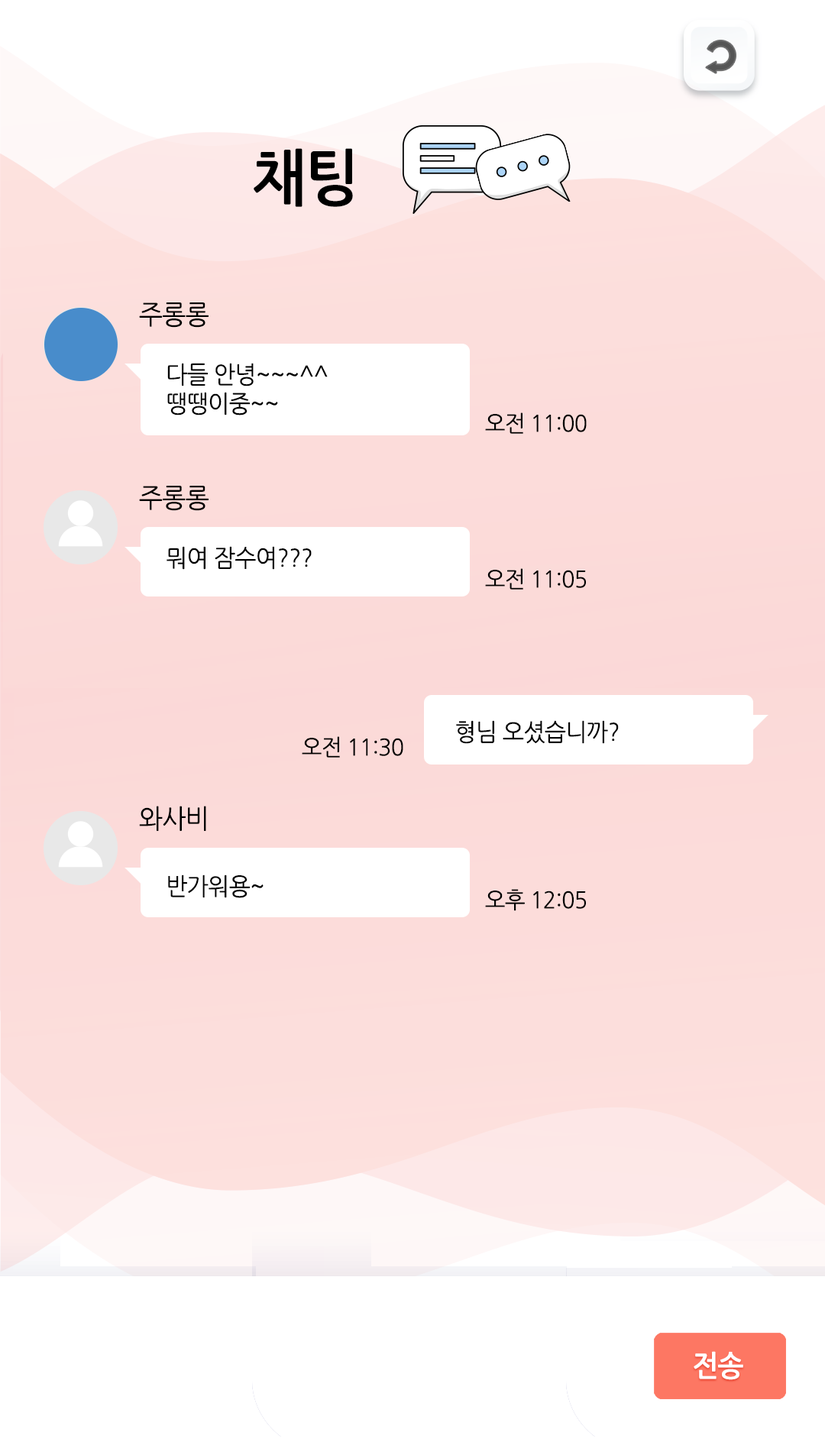
<style>
.page{position:relative;width:825px;height:1445px;background:#ffffff}
.page>*{position:absolute;margin:0}
.t1{font:61.1px "NanumGothicBold";letter-spacing:-0.025em;color:#000000;scale:0.95 1}
.t2{font:26.7px "NanumGothic";letter-spacing:-0.025em;color:#000000;scale:0.95 1}
.t3{font:24.2px "NanumGothic";letter-spacing:-0.025em;color:#000000;scale:0.95 1}
.t4{font:22.9px "NanumGothic";letter-spacing:-0.025em;color:#000000;scale:0.95 1}
.t5{font:29px "NanumGothicBold";letter-spacing:-0.025em;color:#ffffff;scale:0.95 1}
</style>
<div class="page">
<p class="t1" style="left:254px;top:148px;width:99px;height:59px">채팅</p>
<p class="t2" style="left:139px;top:303px;width:70px;height:25px">주롱롱</p>
<p class="t3" style="left:167px;top:363px;width:161px;height:53px">다들 안녕~~~^^<br>땡땡이중~~</p>
<p class="t4" style="left:485px;top:413px;width:102px;height:21px">오전 11:00</p>
<p class="t2" style="left:139px;top:486px;width:70px;height:25px">주롱롱</p>
<p class="t3" style="left:167px;top:546px;width:145px;height:24px">뭐여 잠수여???</p>
<p class="t4" style="left:485px;top:568px;width:101px;height:22px">오전 11:05</p>
<p class="t3" style="left:456px;top:720px;width:163px;height:24px">형님 오셨습니까?</p>
<p class="t4" style="left:302px;top:736px;width:101px;height:22px">오전 11:30</p>
<p class="t2" style="left:139px;top:806px;width:67px;height:25px">와사비</p>
<p class="t3" style="left:168px;top:875px;width:96px;height:23px">반가워용~</p>
<p class="t4" style="left:485px;top:889px;width:101px;height:22px">오후 12:05</p>
<p class="t5" style="left:694px;top:1351px;width:49px;height:29px">전송</p>
</div>
